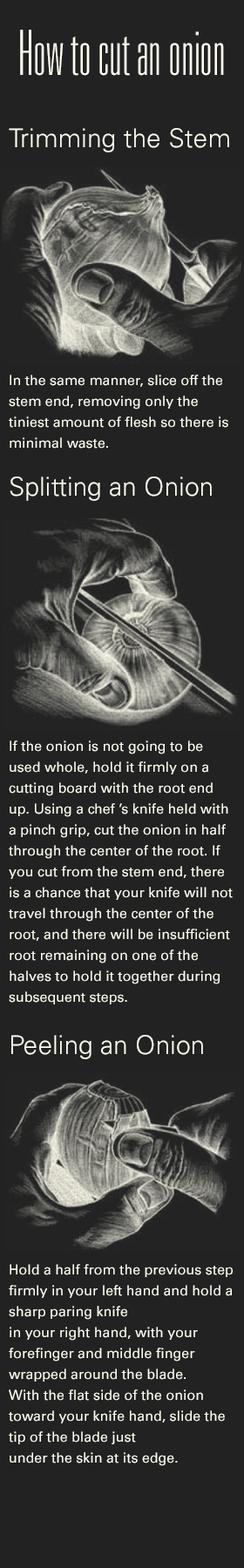
<style>
.page{position:relative;width:244px;height:1568px;background:#222222}
.page>*{position:absolute;margin:0}
.t1{font:62.7px "UniversLTStd-ThinUltraCn";color:#fffeee}
.t2{font:26.1px "UniversLTStd-Light";color:#fffeee}
.t3{font:13.9px/20.9px "UniversLTStd";color:#fffeee}
</style>
<div class="page">
<p class="t1" style="left:20px;top:30px;width:204px;height:46px">How to cut an onion</p>
<p class="t2" style="left:9px;top:128px;width:220px;height:24px">Trimming the Stem</p>
<p class="t3" style="left:9px;top:375px;width:219px;height:74px">In the same manner, slice off the stem end, removing only the tiniest amount of flesh so there is minimal waste.</p>
<p class="t2" style="left:10px;top:476px;width:202px;height:25px">Splitting an Onion</p>
<p class="t3" style="left:9px;top:740px;width:224px;height:264px">If the onion is not going to be used whole, hold it firmly on a cutting board with the root end up. Using a chef ’s knife held with a pinch grip, cut the onion in half through the center of the root. If you cut from the stem end, there is a chance that your knife will not travel through the center of the root, and there will be insufficient root remaining on one of the halves to hold it together during subsequent steps.</p>
<p class="t2" style="left:11px;top:1035px;width:192px;height:24px">Peeling an Onion</p>
<p class="t3" style="left:9px;top:1264px;width:224px;height:202px">Hold a half from the previous step firmly in your left hand and hold a sharp paring knife<br>in your right hand, with your forefinger and middle finger wrapped around the blade.<br>With the flat side of the onion toward your knife hand, slide the tip of the blade just<br>under the skin at its edge.</p>
</div>
